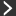
<style>
.page{position:relative;width:16px;height:16px;background:#333333}
.page>*{position:absolute;margin:0}
.t1{font:24.5px "LucidaGrande";color:#ffffff;font-weight:bold;scale:0.57 1}
</style>
<div class="page">
<p class="t1" style="left:3px;top:1px;width:10px;height:15px">&gt;</p>
</div>
